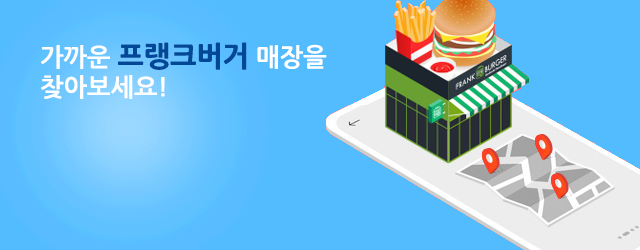
<style>
.page{position:relative;width:640px;height:250px;background:#53bcff}
.page>*{position:absolute;margin:0}
.t1{font:25px "NanumGothicBold";color:#ffffff}
.t2{font:25px "NanumGothicBold";color:#fefefe}
.t3{font:28px "NanumGothicExtraBold";color:#034896}
</style>
<div class="page">
<p class="t1" style="left:41px;top:42px;width:286px;height:57px"><span class="t2">가까운 </span><span class="t3">프랭크버거 </span>매장을<br>찾아보세요!</p>
</div>
